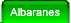
<style>
.page{position:relative;width:71px;height:23px}
.page>*{position:absolute;margin:0}
.t1{font:11px "ArialMT";color:#ffffff}
</style>
<div class="page">
<p class="t1" style="left:10px;top:8px;width:50px;height:8px">Albaranes</p>
</div>
